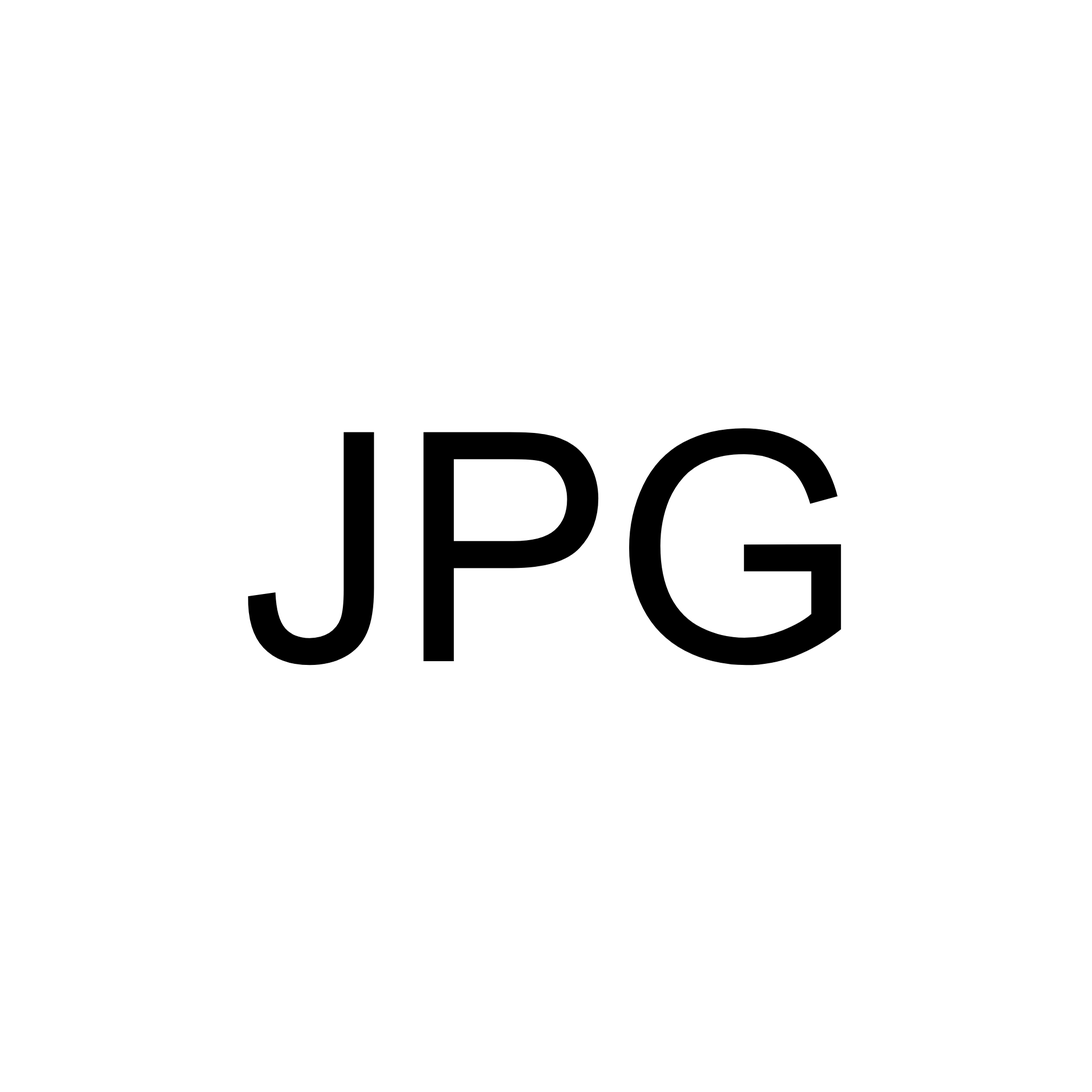
<style>
.page{position:relative;width:1092px;height:1092px;background:#ffffff}
.page>*{position:absolute;margin:0}
.t1{font:319.9px "ArialMT";color:#000000}
</style>
<div class="page">
<p class="t1" style="left:248px;top:428px;width:593px;height:237px">JPG</p>
</div>
